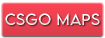
<style>
.page{position:relative;width:105px;height:38px}
.page>*{position:absolute;margin:0}
.t1{font:14px "LEMONMILK-Light";letter-spacing:0.05em;color:#ffffff}
</style>
<div class="page">
<p class="t1" style="left:5px;top:13px;width:95px;height:12px">CSGO MAPS</p>
</div>
